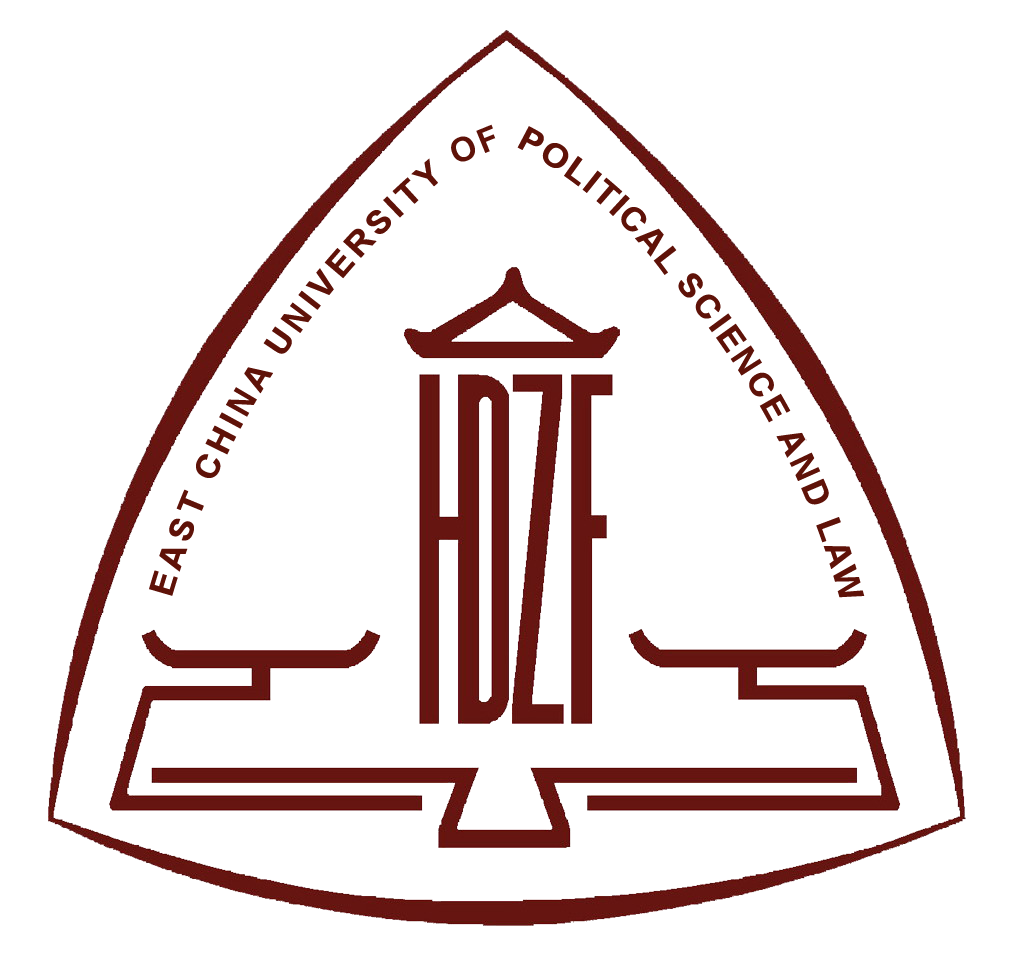
<style>
.page{position:relative;width:1027px;height:953px;background:#ffffff}
.page>*{position:absolute;margin:0}
.t1{font:33.3px "Arial-BoldMT";letter-spacing:0.12em;color:#5f1208}
.t2{font:33.3px "Arial-BoldMT";letter-spacing:0.06em;color:#5f1208}
.t3{font:33.3px "Arial-BoldMT";letter-spacing:0.08em;color:#5f1208}
</style>
<div class="page">
<p class="t1" style="left:451px;top:124px;width:45px;height:38px;rotate:-22deg">OF</p>
<p class="t2" style="left:517px;top:126px;width:160px;height:149px;rotate:41deg">POLITICAL</p>
<p class="t1" style="left:149px;top:158px;width:289px;height:438px;rotate:-54deg">EAST CHINA UNIVERSITY</p>
<p class="t3" style="left:678px;top:273px;width:187px;height:325px;rotate:55deg">SCIENCE AND LAW</p>
</div>
